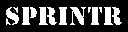
<style>
.page{position:relative;width:128px;height:32px;background:#000000}
.page>*{position:absolute;margin:0}
.t1{font:24px "StencilStd";letter-spacing:0.025em;color:#ffffff}
</style>
<div class="page">
<p class="t1" style="left:6px;top:7px;width:116px;height:18px">Sprintr</p>
</div>
